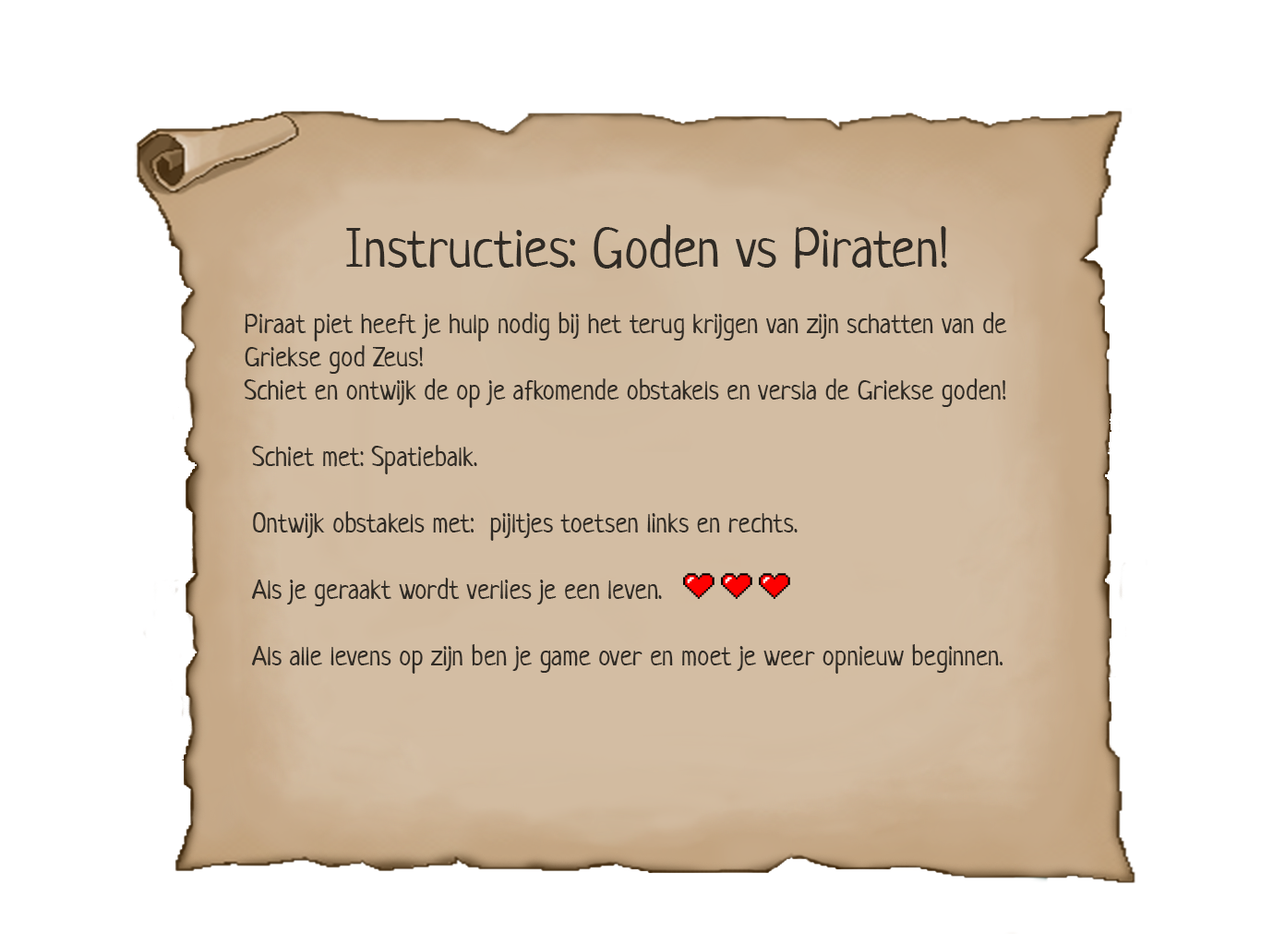
<style>
.page{position:relative;width:1261px;height:945px;background:#ffffff}
.page>*{position:absolute;margin:0}
.t1{font:27.7px "Neucha";color:#302b25}
.t2{font:16.6px "NuevaStd-Cond";color:#302b25}
.t3{font:55.4px "Neucha";color:#302b25}
</style>
<div class="page">
<p class="t1" style="left:244px;top:224px;width:763px;height:450px"><span class="t2"><br></span><span class="t3">Instructies: Goden vs Piraten!<br></span><br>Piraat piet heeft je hulp nodig bij het terug krijgen van zijn schatten van de Griekse god Zeus!<br>Schiet en ontwijk de op je afkomende obstakels en versla de Griekse goden!<br><br> Schiet met: Spatiebalk.<br><br> Ontwijk obstakels met:  pijltjes toetsen links en rechts.<br><br> Als je geraakt wordt verlies je een leven. <br><br> Als alle levens op zijn ben je game over en moet je weer opnieuw beginnen.</p>
</div>
